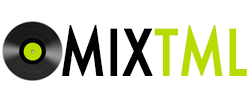
<style>
.page{position:relative;width:250px;height:100px;background:#ffffff}
.page>*{position:absolute;margin:0}
.t1{font:62.4px "Futura-Medium";color:#010101;font-weight:bold;scale:0.77 1}
.t2{font:62.4px "Futura-Medium";color:#b9db01;font-weight:bold;scale:0.77 1}
.t3{font:46.8px "LucidaBright";color:#010101;font-weight:bold;scale:0.77 1}
</style>
<div class="page">
<p class="t1" style="left:62px;top:25px;width:91px;height:51px">MIX</p>
<p class="t2" style="left:154px;top:25px;width:93px;height:51px"><span class="t3">  </span>TML</p>
</div>
